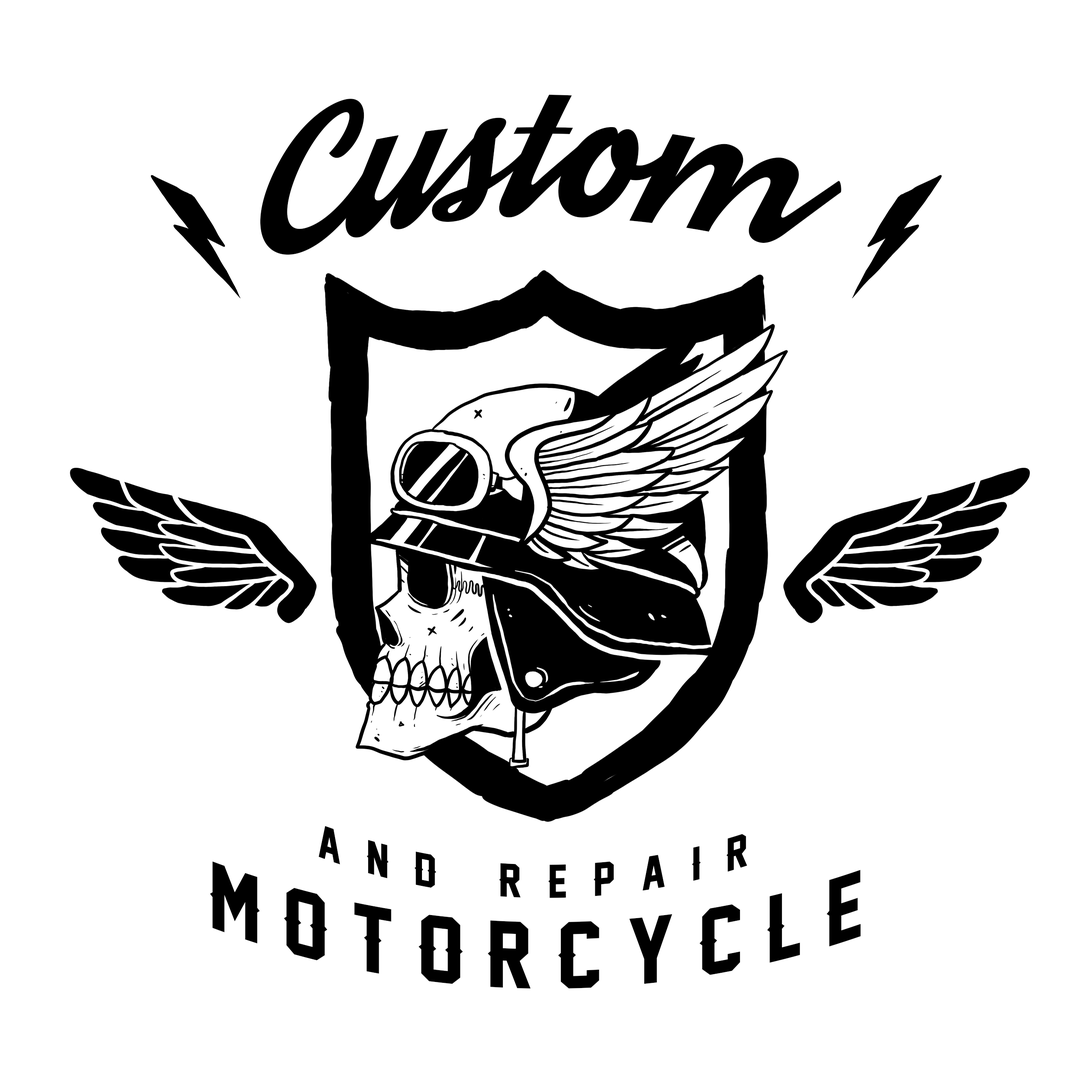
<style>
.page{position:relative;width:1092px;height:1092px;background:#ffffff}
.page>*{position:absolute;margin:0}
.t1{font:140.7px "Streetwear";color:#000000}
.t2{font:43.2px "LegendM54";letter-spacing:0.595em;color:#000000}
.t3{font:86.7px "LegendM54";letter-spacing:0.275em;color:#000000}
</style>
<div class="page">
<p class="t1" style="left:260px;top:94px;width:581px;height:161px">Custom</p>
<p class="t2" style="left:318px;top:826px;width:429px;height:72px">and repair</p>
<p class="t3" style="left:210px;top:861px;width:651px;height:127px">motorcycle</p>
</div>
